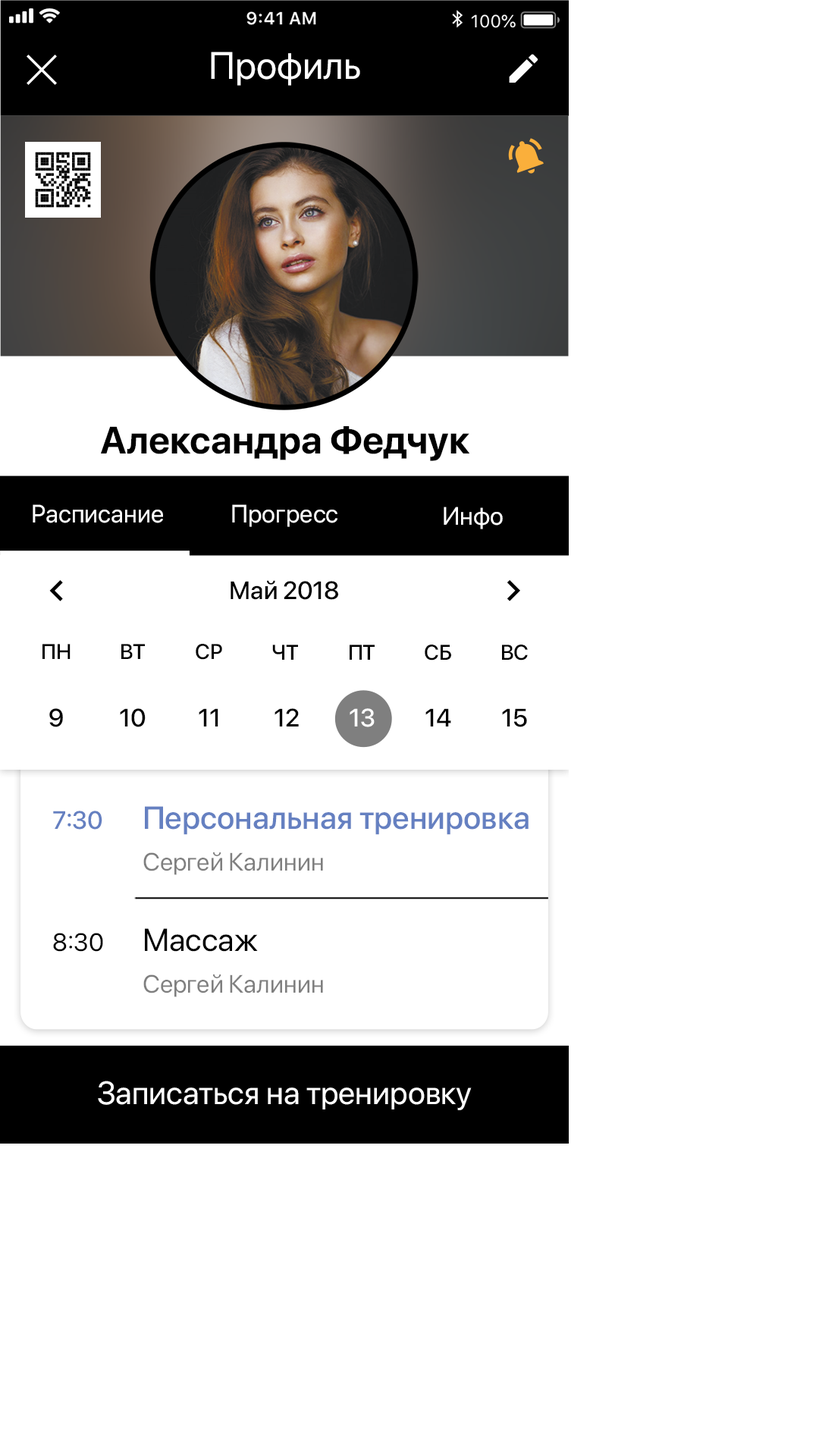
<style>
.page{position:relative;width:819px;height:1456px;background:#ffffff}
.page>*{position:absolute;margin:0}
.t1{font:37.9px "SFProDisplay-Regular";color:#ffffff}
.t2{font:37.9px "SFProDisplay-Bold";color:#000000}
.t3{font:25px "SFProDisplay-Regular";color:#ffffff}
.t4{font:25px "SFProDisplay-Medium";color:#000000}
.t5{font:21.2px "SFProDisplay-Medium";color:#000000}
.t6{font:25px "SFProDisplay-Medium";color:#ffffff}
.t7{font:31.8px "SFProDisplay-Medium";color:#6580c1}
.t8{font:25px "SFProDisplay-Medium";color:#6580c1}
.t9{font:25px "SFProDisplay-Regular";color:#7f7f7f}
.t10{font:31.8px "SFProDisplay-Regular";color:#000000}
.t11{font:25px "SFProDisplay-Regular";color:#000000}
.t12{font:31.8px "SFProDisplay-Regular";color:#ffffff}
</style>
<div class="page">
<p class="t1" style="left:211px;top:52px;width:149px;height:34px">Профиль</p>
<p class="t2" style="left:101px;top:426px;width:369px;height:35px">Александра Федчук</p>
<p class="t3" style="left:33px;top:504px;width:130px;height:19px">Расписание</p>
<p class="t3" style="left:232px;top:504px;width:105px;height:23px">Прогресс</p>
<p class="t3" style="left:444px;top:507px;width:59px;height:22px">Инфо</p>
<p class="t4" style="left:231px;top:580px;width:107px;height:20px">Май 2018</p>
<p class="t5" style="left:42px;top:644px;width:29px;height:15px">ПН</p>
<p class="t5" style="left:121px;top:644px;width:24px;height:15px">ВТ</p>
<p class="t5" style="left:196px;top:644px;width:26px;height:16px">СР</p>
<p class="t5" style="left:272px;top:645px;width:26px;height:15px">ЧТ</p>
<p class="t5" style="left:350px;top:645px;width:25px;height:15px">ПТ</p>
<p class="t5" style="left:425px;top:645px;width:26px;height:15px">СБ</p>
<p class="t5" style="left:502px;top:645px;width:26px;height:15px">ВС</p>
<p class="t4" style="left:49px;top:708px;width:14px;height:19px">9</p>
<p class="t4" style="left:120px;top:708px;width:26px;height:19px">10</p>
<p class="t4" style="left:199px;top:708px;width:19px;height:18px">11</p>
<p class="t4" style="left:275px;top:708px;width:24px;height:18px">12</p>
<p class="t6" style="left:350px;top:708px;width:25px;height:19px">13</p>
<p class="t4" style="left:425px;top:708px;width:26px;height:18px">14</p>
<p class="t4" style="left:502px;top:708px;width:25px;height:19px">15</p>
<p class="t7" style="left:145px;top:806px;width:384px;height:29px">Персональная тренировка</p>
<p class="t8" style="left:53px;top:811px;width:49px;height:19px">7:30</p>
<p class="t9" style="left:143px;top:852px;width:180px;height:23px">Сергей Калинин</p>
<p class="t10" style="left:145px;top:928px;width:113px;height:24px">Массаж</p>
<p class="t11" style="left:53px;top:933px;width:50px;height:19px">8:30</p>
<p class="t9" style="left:143px;top:974px;width:180px;height:23px">Сергей Калинин</p>
<p class="t12" style="left:98px;top:1081px;width:374px;height:29px">Записаться на тренировку</p>
</div>
